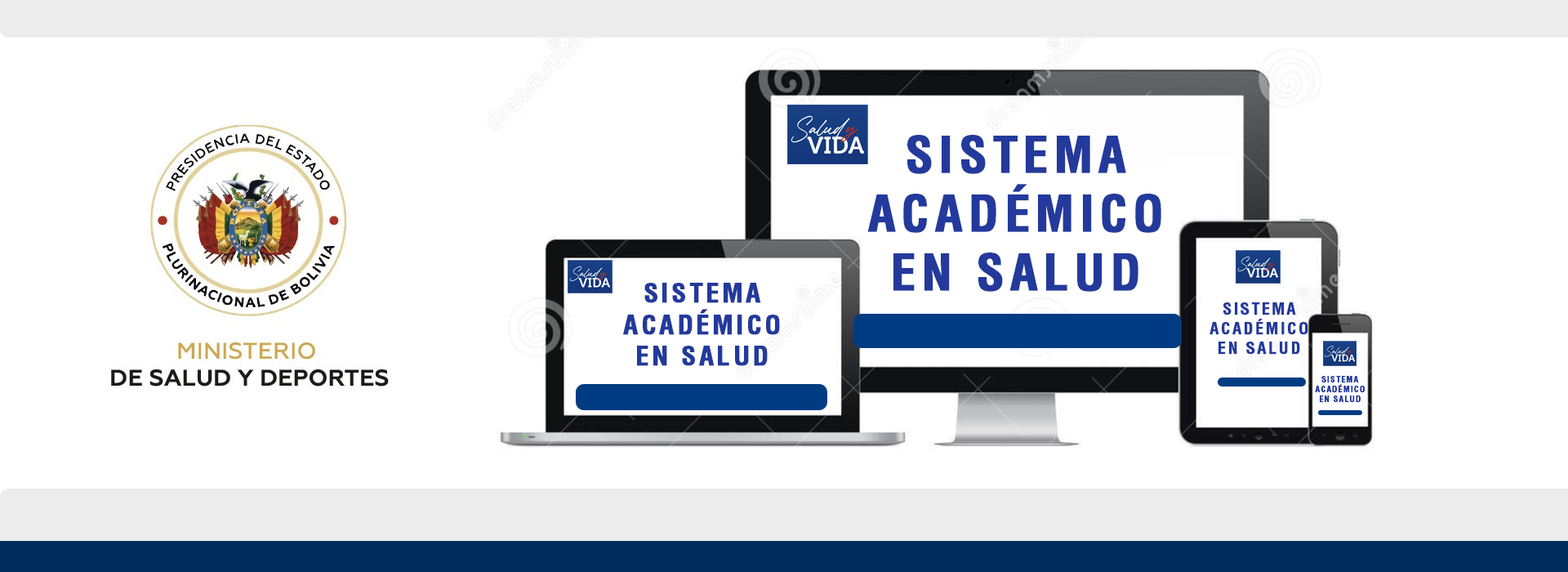
<style>
.page{position:relative;width:1568px;height:572px;background:#ffffff}
.page>*{position:absolute;margin:0}
.t1{font:49px "Helvetica-Condensed-Bold";letter-spacing:0.1em;color:#233a9c;font-weight:bold}
.t2{font:26.1px "Helvetica-Condensed-Bold";letter-spacing:0.1em;color:#233a9c;font-weight:bold}
.t3{font:16.3px "Helvetica-Condensed-Bold";letter-spacing:0.1em;color:#233a9c;font-weight:bold}
.t4{font:8.2px "Helvetica-Condensed-Bold";letter-spacing:0.1em;color:#233a9c;font-weight:bold}
</style>
<div class="page">
<p class="t1" style="left:867px;top:135px;width:294px;height:157px;text-align:center">SISTEMA<br>ACADÉMICO<br>EN SALUD</p>
<p class="t2" style="left:623px;top:283px;width:157px;height:83px;text-align:center">SISTEMA<br>ACADÉMICO<br>EN SALUD</p>
<p class="t3" style="left:1209px;top:302px;width:99px;height:52px;text-align:center">SISTEMA<br>ACADÉMICO<br>EN SALUD</p>
<p class="t4" style="left:1315px;top:376px;width:50px;height:27px;text-align:center">SISTEMA<br>ACADÉMICO<br>EN SALUD</p>
</div>
